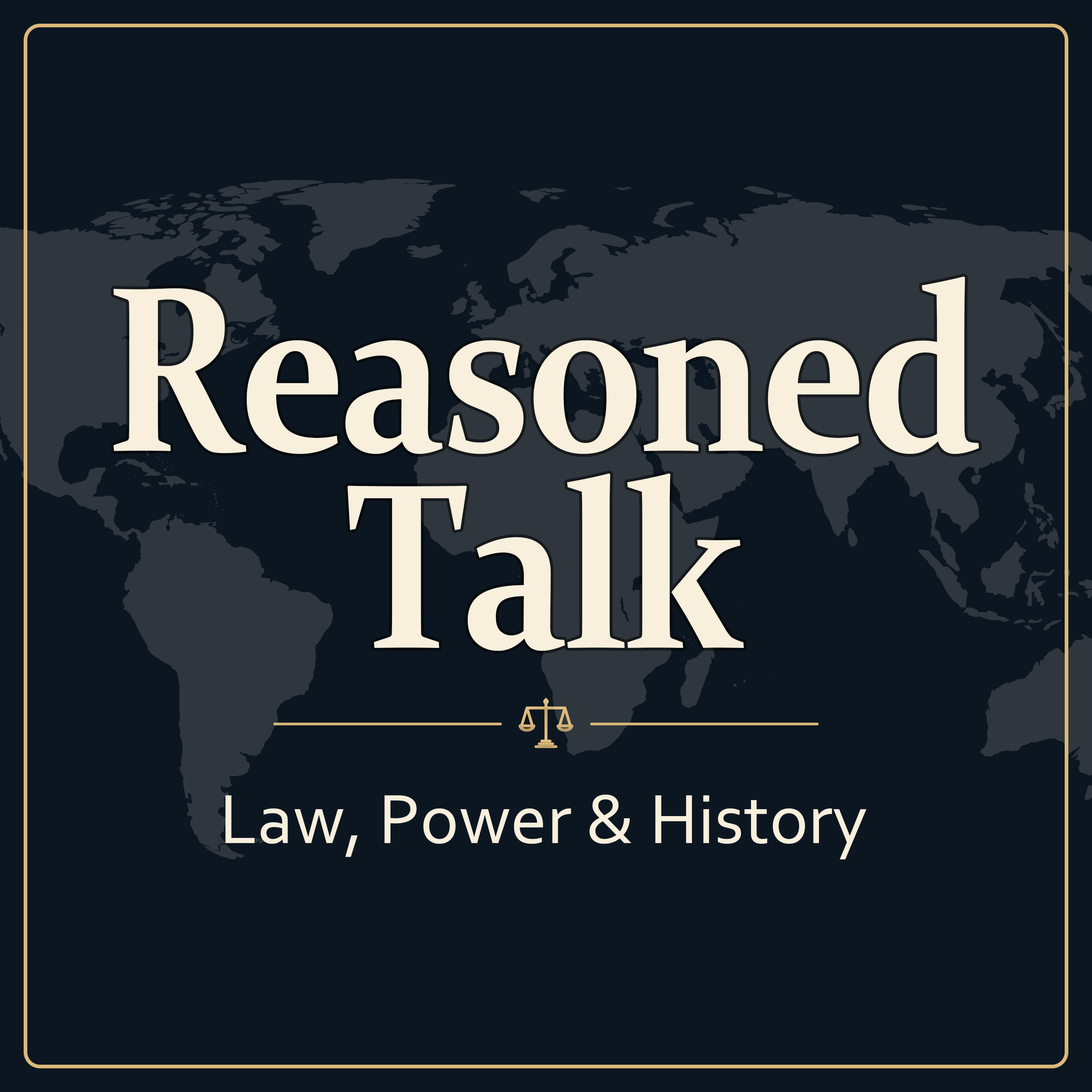
<style>
.page{position:relative;width:1092px;height:1092px;background:#0c1621}
.page>*{position:absolute;margin:0}
.t1{font:236.6px/197.2px "Constantia-Bold";letter-spacing:-0.025em;color:#f8efdd;scale:0.83 1}
.t2{font:72.8px "Corbel";color:#f8efdd}
</style>
<div class="page">
<p class="t1" style="left:114px;top:276px;width:865px;height:375px;text-align:center">Reasoned<br>Talk</p>
<p class="t2" style="left:225px;top:795px;width:641px;height:64px">Law, Power &amp; History</p>
</div>
